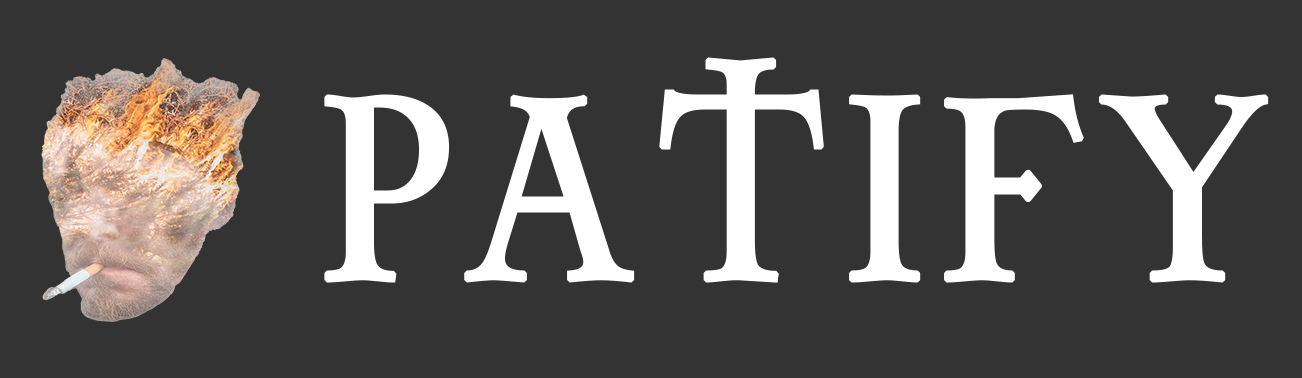
<style>
.page{position:relative;width:1302px;height:378px;background:#333333}
.page>*{position:absolute;margin:0}
.t1{font:227px "CelticGaramondthe2nd";letter-spacing:0.1em;color:#ffffff;font-variant:small-caps;font-weight:bold;scale:0.81 1}
</style>
<div class="page">
<p class="t1" style="left:324px;top:57px;width:945px;height:226px">PATIFYY</p>
</div>
